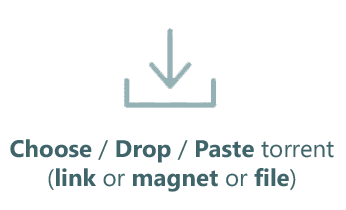
<style>
.page{position:relative;width:346px;height:210px;background:#ffffff}
.page>*{position:absolute;margin:0}
.t1{font:24px "MicrosoftPhagsPa";color:#3f6469}
.t2{font:24px "MicrosoftPhagsPa-Bold";color:#3f6469}
</style>
<div class="page">
<p class="t1" style="left:10px;top:139px;width:324px;height:53px;text-align:center"><span class="t2">Choose </span>/<span class="t2"> Drop </span>/ <span class="t2">Paste</span> torrent<br>(<span class="t2">link </span>or <span class="t2">magnet </span>or <span class="t2">file</span>)</p>
</div>
